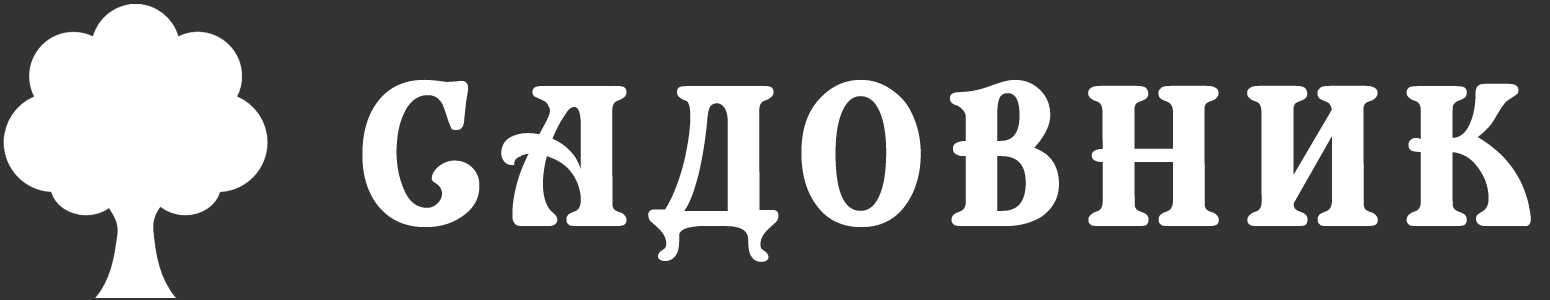
<style>
.page{position:relative;width:1550px;height:300px;background:#333333}
.page>*{position:absolute;margin:0}
.t1{font:213.3px "Mirabelle";letter-spacing:0.075em;color:#ffffff}
</style>
<div class="page">
<p class="t1" style="left:362px;top:79px;width:1169px;height:183px">САДОВНИК</p>
</div>
